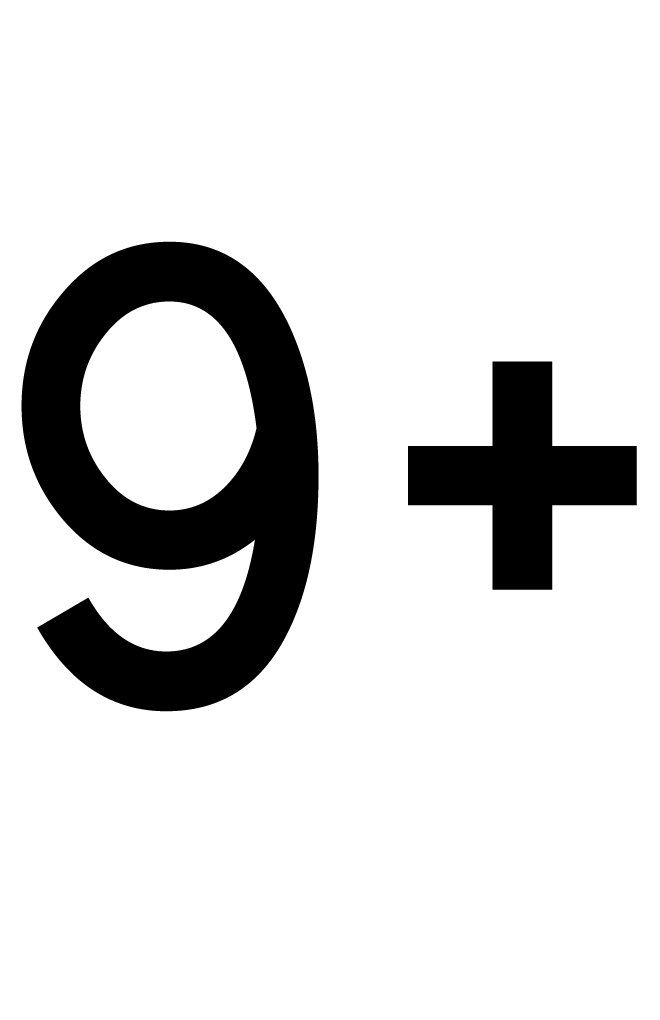
<style>
.page{position:relative;width:660px;height:1020px;background:#ffffff}
.page>*{position:absolute;margin:0}
.t1{font:541.7px "CardCharacters";color:#000000}
</style>
<div class="page">
<p class="t1" style="left:21px;top:241px;width:616px;height:471px">9+</p>
</div>
